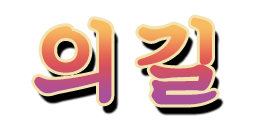
<style>
.page{position:relative;width:256px;height:128px;background:#ffffff}
.page>*{position:absolute;margin:0}
.t1{font:94px "SDKukdetopokki-aLt";letter-spacing:0.12em;font-weight:bold}
</style>
<div class="page">
<p class="t1" style="left:34px;top:17px;width:183px;height:88px">의길</p>
</div>
